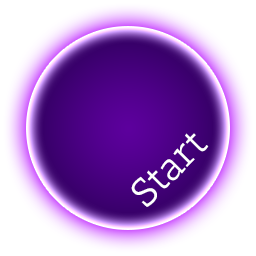
<style>
.page{position:relative;width:256px;height:256px;background:#ffffff}
.page>*{position:absolute;margin:0}
.t1{font:39.5px "Foro-Light";color:#ffffff}
</style>
<div class="page">
<p class="t1" style="left:131px;top:133px;width:78px;height:74px;rotate:-45deg">Start</p>
</div>
